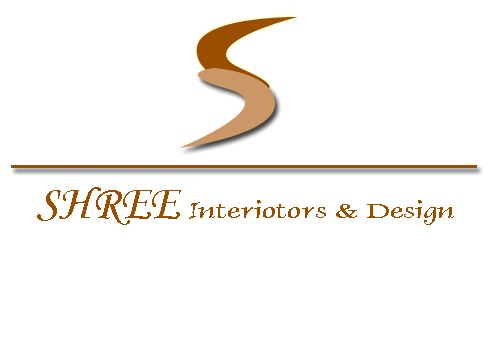
<style>
.page{position:relative;width:490px;height:342px;background:#ffffff}
.page>*{position:absolute;margin:0}
.t1{font:24px "DolphinExtendedNormal";color:#9a4e00}
.t2{font:48px "MonotypeCorsiva";color:#9a4e00}
.t3{font:24px "VinerHandITC";color:#9a4e00}
</style>
<div class="page">
<p class="t1" style="left:37px;top:187px;width:417px;height:38px"><span class="t2">SHREE </span><span class="t3">I</span>nteriotors &amp; Design</p>
</div>
